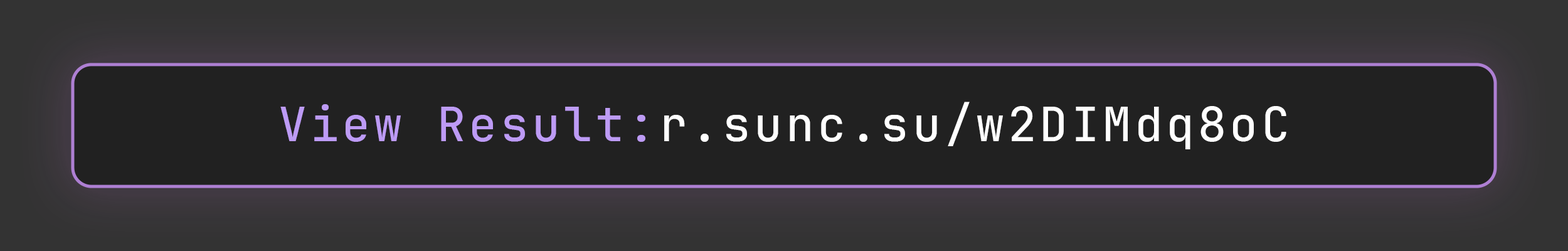
<style>
.page{position:relative;width:1568px;height:251px;background:#212121}
.page>*{position:absolute;margin:0}
.t1{font:47px "JetBrainsMono-Medium";letter-spacing:0.075em;color:#ffffff}
.t2{font:47px "JetBrainsMono-Medium";letter-spacing:0.075em;color:#bd9bf5}
</style>
<div class="page">
<p class="t1" style="left:280px;top:102px;width:1006px;height:47px"><span class="t2">View Result:</span>r.sunc.su/w2DIMdq8oC</p>
</div>
